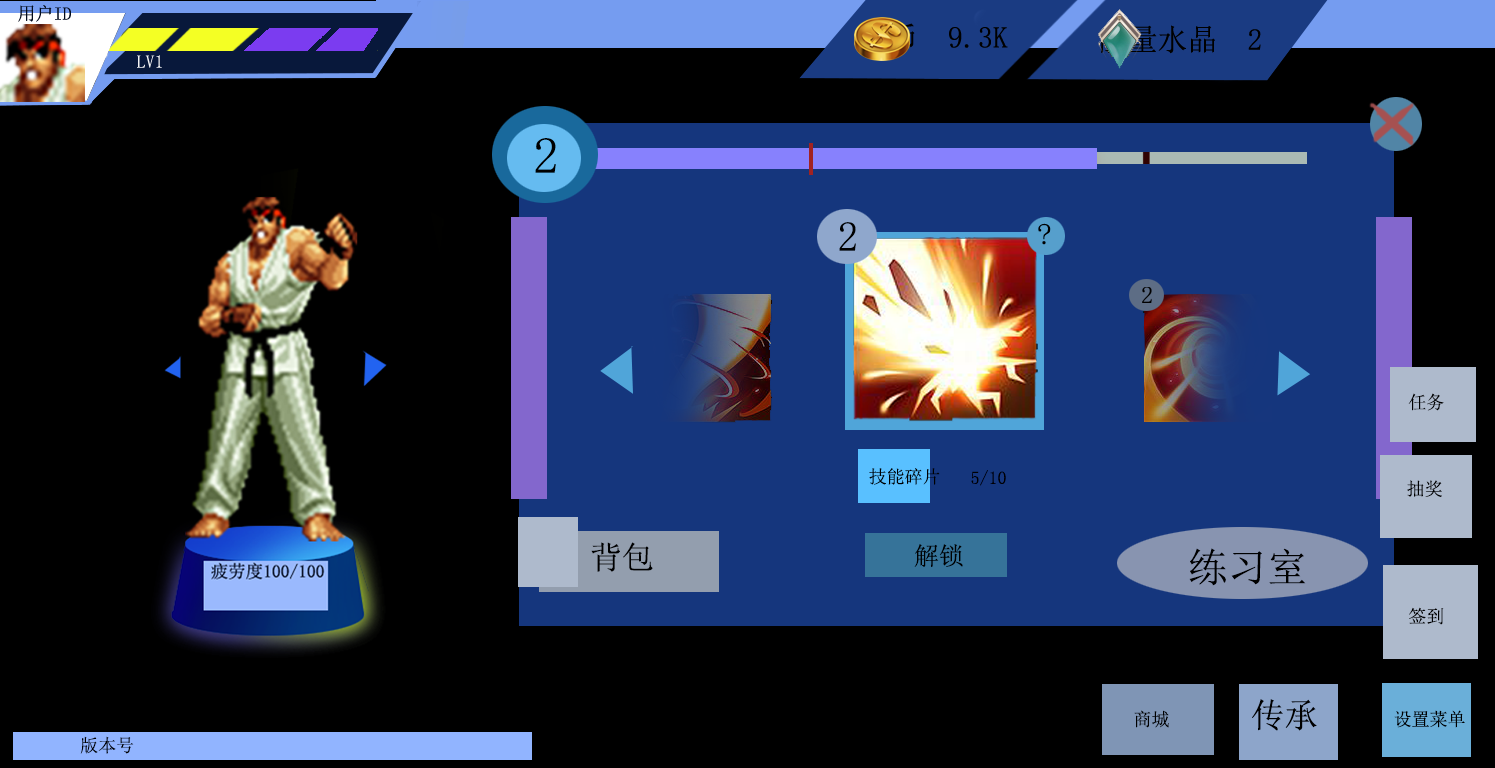
<style>
.page{position:relative;width:1495px;height:768px;background:#000000}
.page>*{position:absolute;margin:0}
.t1{font:51px "SimSun";color:#000000}
.t2{font:42px "SimSun";color:#000000}
.t3{font:29px "SimSun";color:#000000;scale:1.03 1}
.t4{font:18px "SimSun";color:#000000}
.t5{font:32px "SimSun";color:#000000}
.t6{font:25px "SimSun";color:#000000}
.t7{font:40px "SimSun";color:#000000}
.t8{font:34px "SimSun";color:#000000}
</style>
<div class="page">
<p class="t1" style="left:535px;top:138px;width:21px;height:35px">2</p>
<p class="t2" style="left:839px;top:222px;width:17px;height:29px">2</p>
<p class="t3" style="left:1038px;top:223px;width:13px;height:22px">?</p>
<p class="t4" style="left:1408px;top:393px;width:36px;height:18px">任务</p>
<p class="t4" style="left:869px;top:468px;width:71px;height:17px">技能碎片</p>
<p class="t4" style="left:971px;top:470px;width:35px;height:16px">5/10</p>
<p class="t4" style="left:1407px;top:480px;width:35px;height:17px">抽奖</p>
<p class="t5" style="left:591px;top:542px;width:62px;height:30px">背包</p>
<p class="t6" style="left:914px;top:544px;width:49px;height:23px">解锁</p>
<p class="t7" style="left:1189px;top:548px;width:117px;height:38px">练习室</p>
<p class="t4" style="left:1409px;top:607px;width:35px;height:18px">签到</p>
<p class="t8" style="left:1252px;top:699px;width:65px;height:32px">传承</p>
<p class="t4" style="left:1134px;top:710px;width:35px;height:18px">商城</p>
<p class="t4" style="left:1394px;top:710px;width:71px;height:18px">设置菜单</p>
<p class="t4" style="left:80px;top:736px;width:54px;height:18px">版本号</p>
</div>
